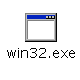
<style>
.page{position:relative;width:80px;height:80px;background:#ffffff}
.page>*{position:absolute;margin:0}
.t1{font:14px "MSReferenceSansSerif";color:#000000}
</style>
<div class="page">
<p class="t1" style="left:7px;top:48px;width:68px;height:10px">win32.exe</p>
</div>
